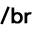
<style>
.page{position:relative;width:32px;height:32px;background:#ffffff}
.page>*{position:absolute;margin:0}
.t1{font:21.4px "ProductSans-Regular";letter-spacing:0.015em;color:#040006;font-weight:bold}
</style>
<div class="page">
<p class="t1" style="left:0px;top:6px;width:32px;height:19px">/br</p>
</div>
